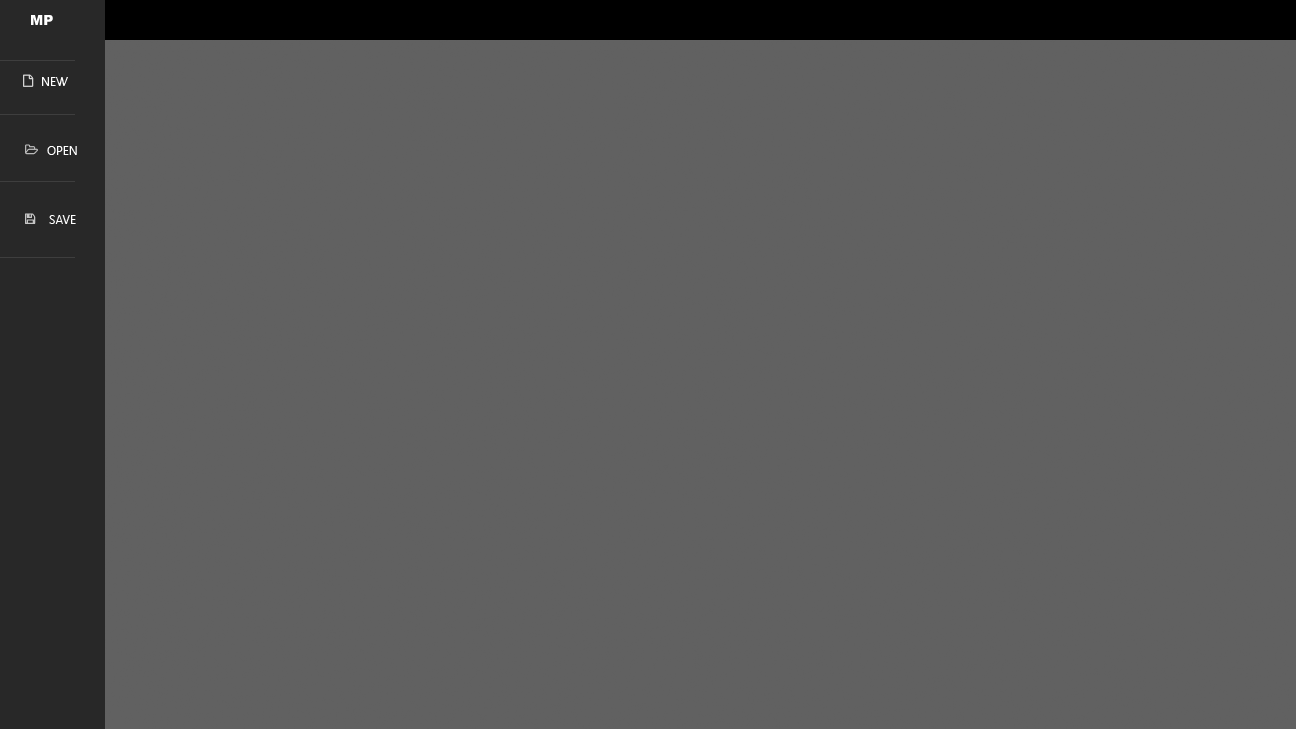
<style>
.page{position:relative;width:1296px;height:729px;background:#616161}
.page>*{position:absolute;margin:0}
.t1{font:14px "Arial-Black";color:#ffffff}
.t2{font:12px "SegoeUI";color:#ffffff;text-transform:uppercase}
</style>
<div class="page">
<p class="t1" style="left:31px;top:15px;width:22px;height:10px">MP</p>
<p class="t2" style="left:42px;top:77px;width:26px;height:9px">New</p>
<p class="t2" style="left:47px;top:146px;width:30px;height:9px">Open</p>
<p class="t2" style="left:49px;top:215px;width:27px;height:9px">SaVE</p>
</div>
